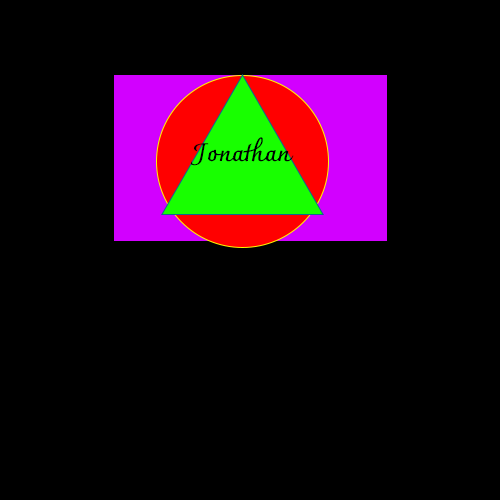
<style>
.page{position:relative;width:500px;height:500px;background:#000000}
.page>*{position:absolute;margin:0}
.t1{font:25px "Charmonman-Bold";color:#000000}
</style>
<div class="page">
<p class="t1" style="left:191px;top:137px;width:103px;height:29px">Jonathan</p>
</div>
